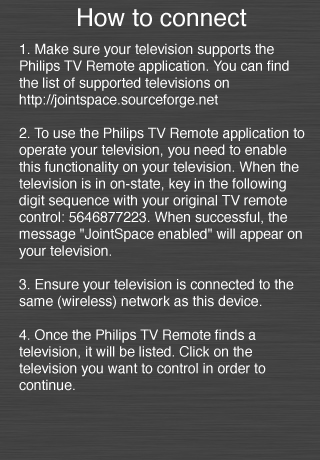
<style>
.page{position:relative;width:320px;height:460px}
.page>*{position:absolute;margin:0}
.t1{font:24.7px "Helvetica";color:#ffffff}
.t2{font:14px "Helvetica";color:#ffffff}
</style>
<div class="page">
<p class="t1" style="left:78px;top:8px;width:169px;height:19px">How to connect</p>
<p class="t2" style="left:19px;top:43px;width:286px;height:348px">1. Make sure your television supports the Philips TV Remote application. You can find the list of supported televisions on http://jointspace.sourceforge.net<br>            <br>2. To use the Philips TV Remote application to operate your television, you need to enable this functionality on your television. When the television is in on-state, key in the following digit sequence with your original TV remote control: 5646877223. When successful, the message "JointSpace enabled" will appear on your television.<br><br>3. Ensure your television is connected to the same (wireless) network as this device.<br><br>4. Once the Philips TV Remote finds a television, it will be listed. Click on the television you want to control in order to continue.</p>
</div>
